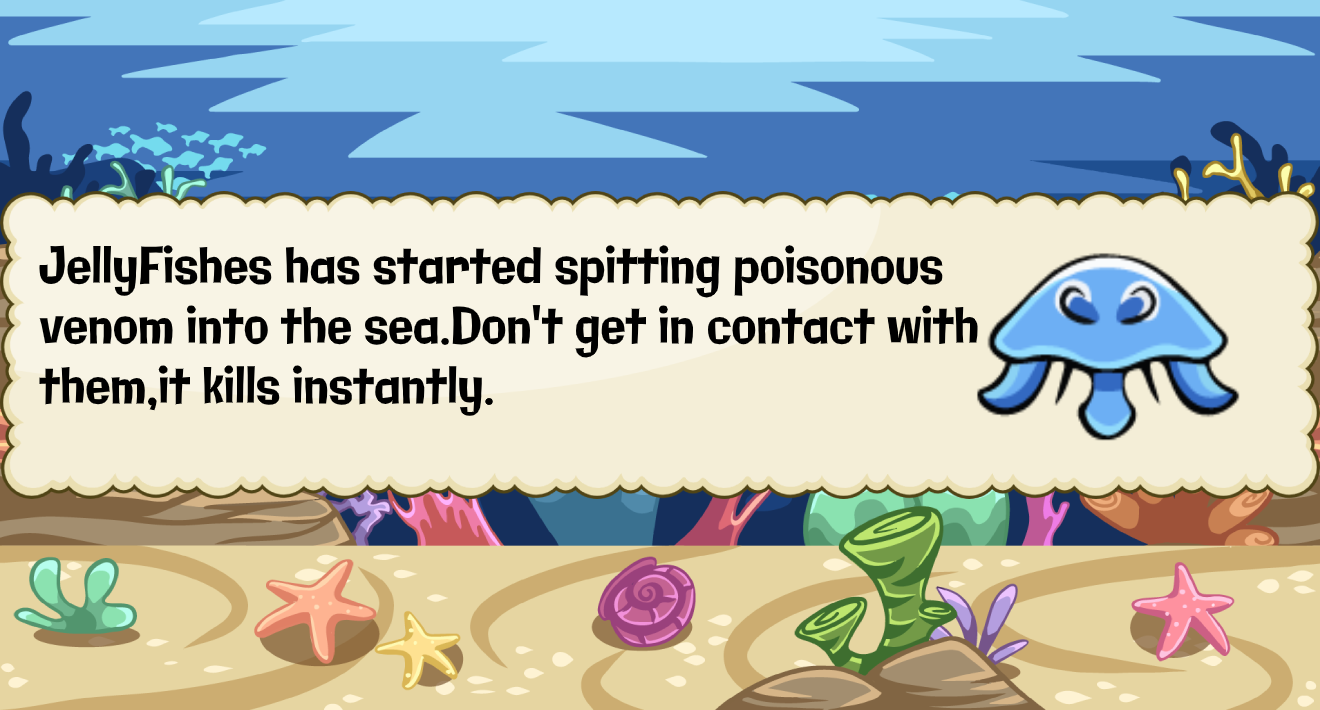
<style>
.page{position:relative;width:1320px;height:710px}
.page>*{position:absolute;margin:0}
.t1{font:50.1px "Galindo-Regular";color:#000000;scale:0.82 1}
</style>
<div class="page">
<p class="t1" style="left:39px;top:245px;width:939px;height:171px">JellyFishes has started spitting poisonous <br>venom into the sea.Don't get in contact with <br>them,it kills instantly.</p>
</div>
